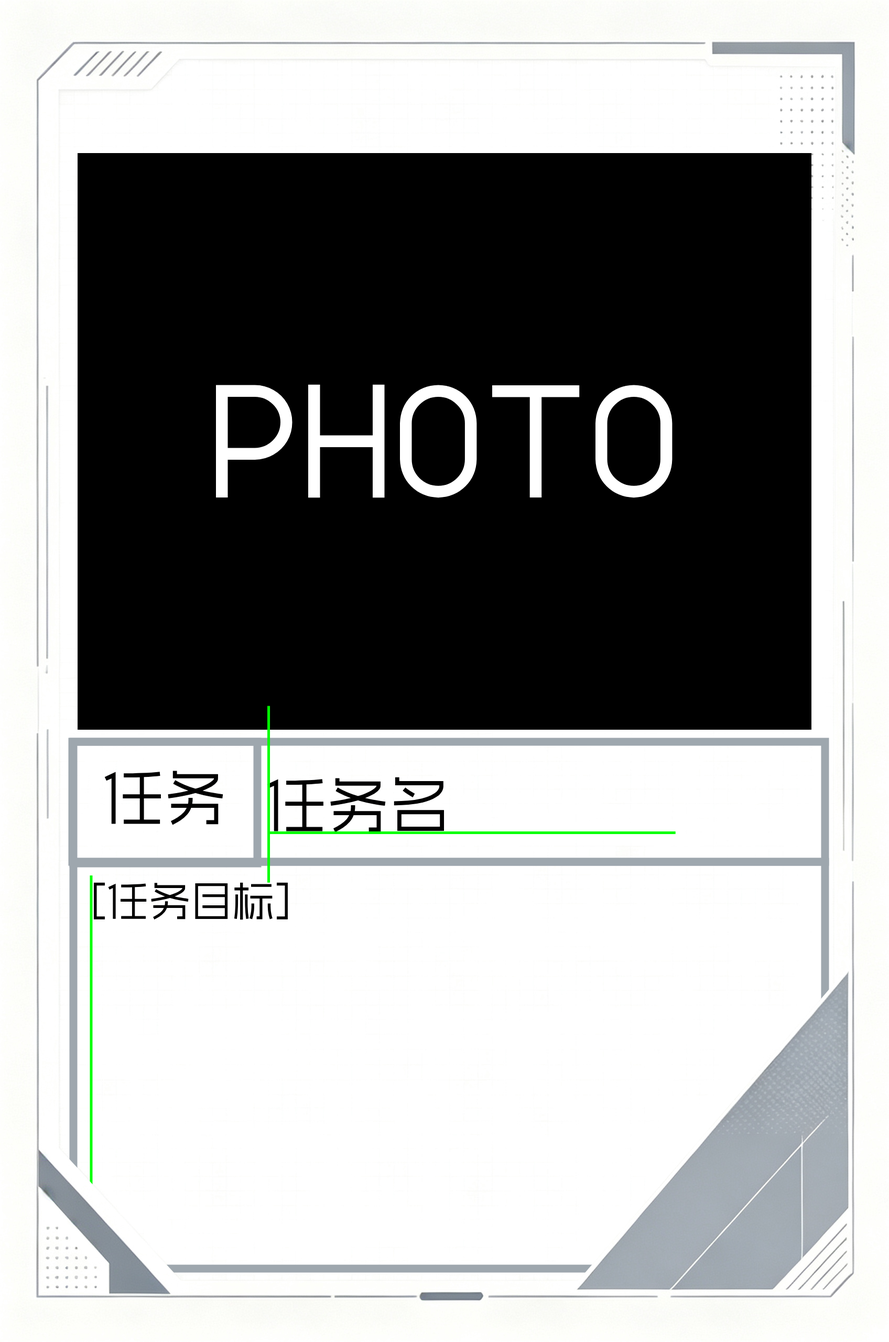
<style>
.page{position:relative;width:889px;height:1342px;background:#000000}
.page>*{position:absolute;margin:0}
.t1{font:61.8px "AidianFengYaHei";color:#000000}
.t2{font:41.9px "AidianFengYaHei";color:#000000}
</style>
<div class="page">
<p class="t1" style="left:104px;top:770px;width:119px;height:55px">任务</p>
<p class="t1" style="left:267px;top:777px;width:177px;height:55px">任务名</p>
<p class="t2" style="left:94px;top:882px;width:194px;height:38px">[任务目标]</p>
</div>
